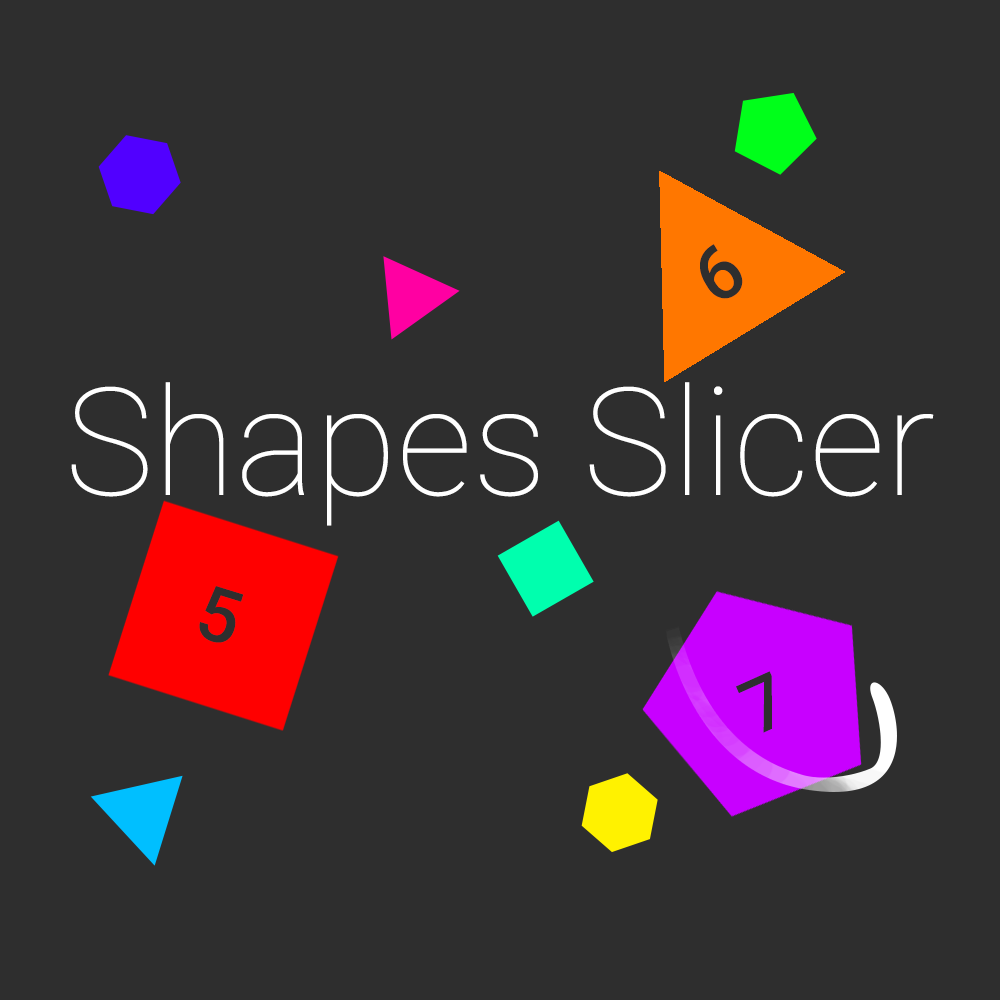
<style>
.page{position:relative;width:1000px;height:1000px;background:#2e2e2e}
.page>*{position:absolute;margin:0}
.t1{font:75px "Roboto-Medium";color:#2e2e2e}
.t2{font:150px "Roboto-Thin";color:#ffffff}
</style>
<div class="page">
<p class="t1" style="left:700px;top:244px;width:43px;height:55px;rotate:-31deg">6</p>
<p class="t2" style="left:71px;top:382px;width:863px;height:144px">Shapes Slicer</p>
<p class="t1" style="left:199px;top:586px;width:45px;height:57px;rotate:17deg">5</p>
<p class="t1" style="left:736px;top:671px;width:36px;height:62px;rotate:-24deg">7</p>
</div>
